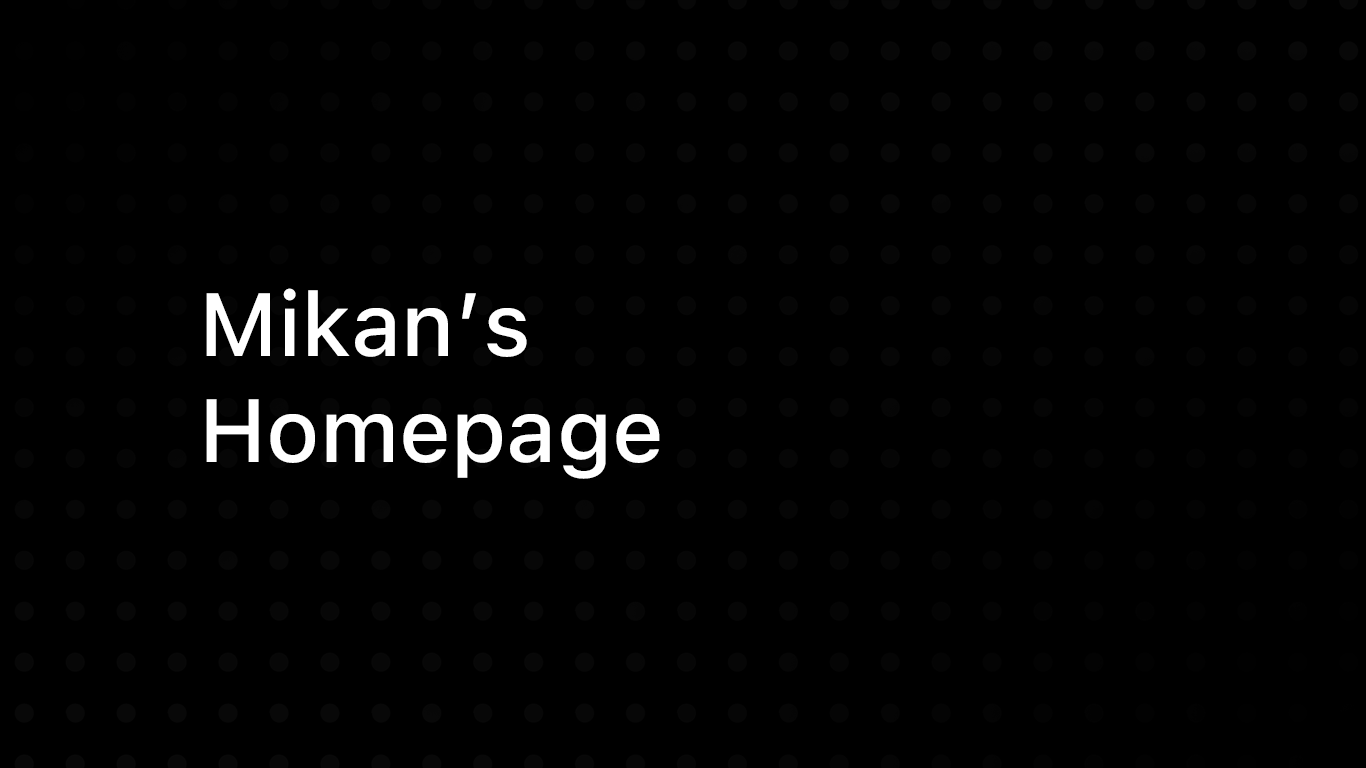
<style>
.page{position:relative;width:1366px;height:768px;background:#000000}
.page>*{position:absolute;margin:0}
.t1{font:89px "SFProText-Medium";color:#ffffff}
</style>
<div class="page">
<p class="t1" style="left:206px;top:288px;width:454px;height:191px">Mikan’s<br>Homepage</p>
</div>
